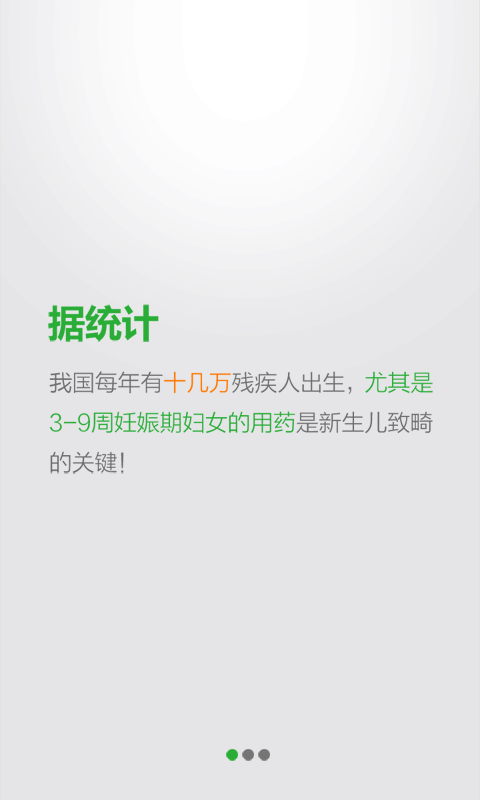
<style>
.page{position:relative;width:480px;height:800px;background:#e5e5e7}
.page>*{position:absolute;margin:0}
.t1{font:37.2px "MicrosoftYaHei-Bold";color:#29ad37}
.t2{font:23.3px/40px "FZLTXHK";color:#29ad37}
.t3{font:23.3px/40px "FZLTXHK";color:#6b6b6b}
.t4{font:23.3px/40px "FZLTXHK";color:#ff7800}
</style>
<div class="page">
<p class="t1" style="left:48px;top:304px;width:111px;height:38px">据统计</p>
<p class="t2" style="left:49px;top:371px;width:384px;height:103px"><span class="t3">我国每年有</span><span class="t4">十几万</span><span class="t3">残疾人出生，</span>尤其是<br>3-9周妊娠期妇女的用药<span class="t3">是新生儿致畸<br>的关键！</span></p>
</div>
